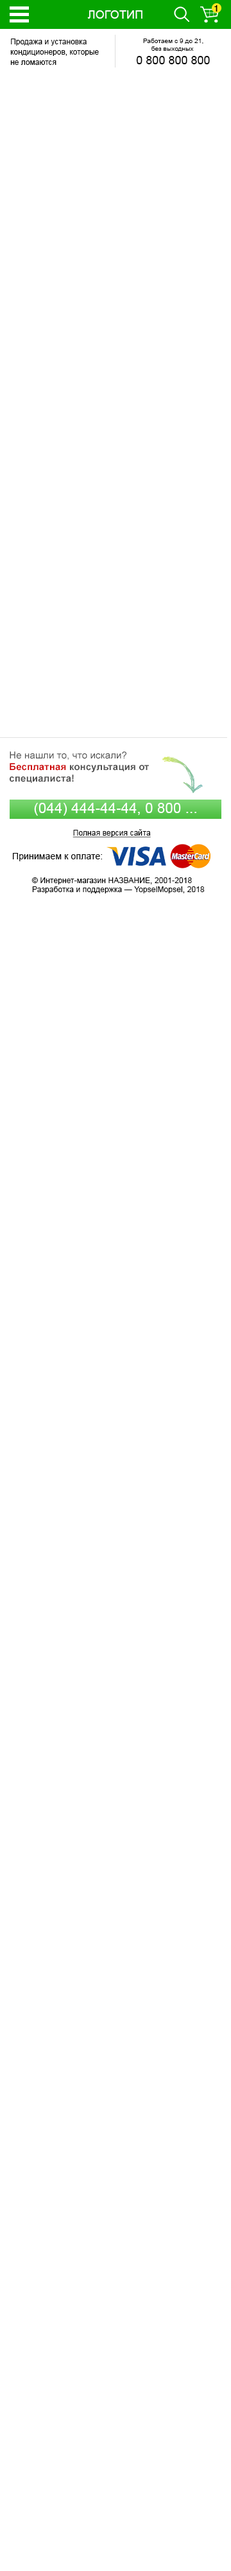
<style>
.page{position:relative;width:231px;height:2571px;background:#ffffff}
.page>*{position:absolute;margin:0}
.t1{font:9px "HelveticaNeue-Medium";letter-spacing:0.01em;color:#000000}
.t2{font:11.6px "ArialMT";letter-spacing:0.01em;color:#ffffff}
.t3{font:7.7px/10.3px "ArialMT";color:#000000}
.t4{font:6.5px "ArialMT";letter-spacing:0.01em;color:#000000}
.t5{font:11.7px "ArialMT";color:#000000}
.t6{font:9.6px "Arial-BoldMT";letter-spacing:0.01em;color:#4f4f4f}
.t7{font:9.6px "ArialMT";letter-spacing:0.01em;color:#4f4f4f}
.t8{font:9.6px "Arial-BoldMT";letter-spacing:0.01em;color:#cc0001}
.t9{font:14.2px "ArialMT";letter-spacing:0.01em;color:#ffffff}
.t10{font:7.7px "ArialMT";letter-spacing:0.01em;color:#000000;text-decoration:underline}
.t11{font:9px "ArialMT";letter-spacing:0.01em;color:#000000}
.t12{font:7.7px "ArialMT";letter-spacing:0.01em;color:#000000}
</style>
<div class="page">
<p class="t1" style="left:215px;top:5px;width:3px;height:7px">1</p>
<p class="t2" style="left:87px;top:10px;width:56px;height:9px">ЛОГОТИП</p>
<p class="t3" style="left:10px;top:39px;width:89px;height:26px">Продажа и установка<br>кондиционеров, которые<br>не ломаются</p>
<p class="t4" style="left:143px;top:39px;width:61px;height:12px;text-align:center">Работаем с 9 до 21,<br>без выходных</p>
<p class="t5" style="left:136px;top:56px;width:74px;height:8px">0 800 800 800</p>
<p class="t6" style="left:10px;top:752px;width:139px;height:31px"><span class="t7">Не нашли то, что искали?<br></span><span class="t8">Бесплатная</span> консультация от<br>специалиста!</p>
<p class="t9" style="left:34px;top:803px;width:163px;height:13px">(044) 444-44-44, 0 800 ...</p>
<p class="t10" style="left:73px;top:829px;width:78px;height:9px">Полная версия сайта</p>
<p class="t11" style="left:13px;top:853px;width:89px;height:8px">Принимаем к оплате:</p>
<p class="t12" style="left:32px;top:878px;width:173px;height:16px">© Интернет-магазин НАЗВАНИЕ, 2001-2018<br>Разработка и поддержка — YopselMopsel, 2018</p>
</div>
